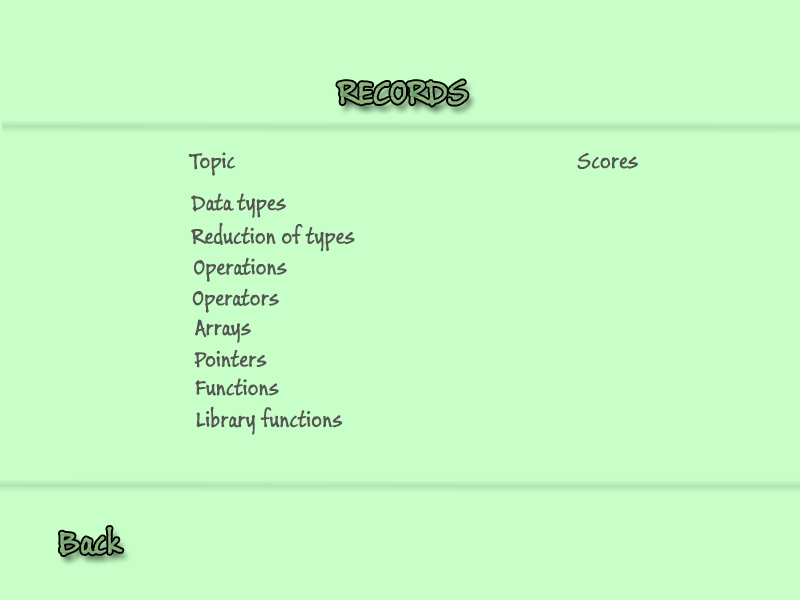
<style>
.page{position:relative;width:800px;height:600px;background:#c8ffc8}
.page>*{position:absolute;margin:0}
.t1{font:36px "BuxtonSketch";color:#8cb57d}
.t2{font:24px "BuxtonSketch";color:#555553}
</style>
<div class="page">
<p class="t1" style="left:337px;top:80px;width:131px;height:26px">RECORDS</p>
<p class="t2" style="left:188px;top:152px;width:47px;height:24px">Topic</p>
<p class="t2" style="left:577px;top:153px;width:61px;height:16px">Scores</p>
<p class="t2" style="left:191px;top:193px;width:95px;height:25px">Data types</p>
<p class="t2" style="left:191px;top:222px;width:164px;height:30px">Reduction of types</p>
<p class="t2" style="left:194px;top:257px;width:93px;height:25px">Operations</p>
<p class="t2" style="left:192px;top:288px;width:87px;height:25px">Operators</p>
<p class="t2" style="left:195px;top:319px;width:56px;height:24px">Arrays</p>
<p class="t2" style="left:194px;top:350px;width:73px;height:18px">Pointers</p>
<p class="t2" style="left:195px;top:378px;width:84px;height:18px">Functions</p>
<p class="t2" style="left:196px;top:406px;width:147px;height:29px">Library functions</p>
</div>
